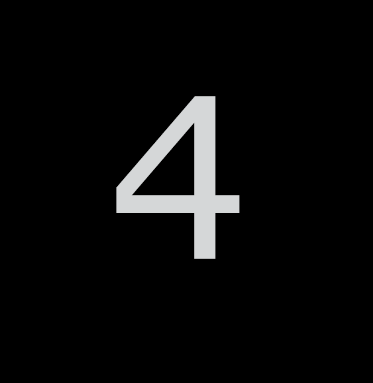
<style>
.page{position:relative;width:373px;height:383px;background:#000000}
.page>*{position:absolute;margin:0}
.t1{font:223.1px "Verdana";color:#d5d7d8}
</style>
<div class="page">
<p class="t1" style="left:116px;top:96px;width:124px;height:163px">4</p>
</div>
